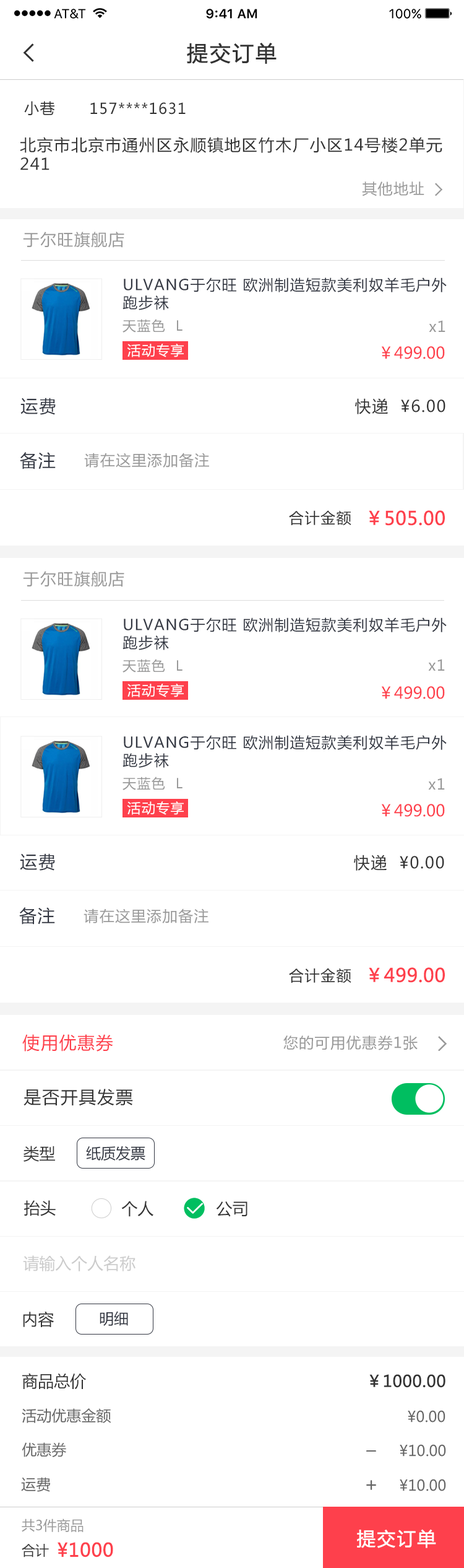
<style>
.page{position:relative;width:464px;height:1568px;background:#ffffff}
.page>*{position:absolute;margin:0}
.t1{font:21.1px "MicrosoftYaHei";letter-spacing:0.06em;color:#333333;font-weight:bold}
.t2{font:14.9px "MicrosoftYaHei";letter-spacing:0.06em;color:#333333}
.t3{font:16.1px "MicrosoftYaHei";letter-spacing:0.06em;color:#333333}
.t4{font:14.9px "MicrosoftYaHei";letter-spacing:0.06em;color:#999999}
.t5{font:16.1px "MicrosoftYaHei";letter-spacing:0.06em;color:#999999}
.t6{font:14.8px "MicrosoftYaHei";letter-spacing:0.06em;color:#343843}
.t7{font:13.6px "MicrosoftYaHei";letter-spacing:0.06em;color:#999999}
.t8{font:13.6px "MicrosoftYaHei";letter-spacing:0.06em;color:#ffffff}
.t9{font:16.1px "MicrosoftYaHei";color:#fe404c}
.t10{font:17.3px "MicrosoftYaHei";letter-spacing:0.06em;color:#343843}
.t11{font:18.6px "MicrosoftYaHei";color:#fe404c;font-weight:bold}
.t12{font:17.3px "MicrosoftYaHei";letter-spacing:0.06em;color:#fe404c}
.t13{font:17.3px "MicrosoftYaHei";letter-spacing:0.06em;color:#333333}
.t14{font:16.1px "MicrosoftYaHei";color:#333333}
.t15{font:14.9px "MicrosoftYaHei";color:#343843}
.t16{font:16.1px "MicrosoftYaHei";color:#cccccc}
.t17{font:16.1px "MicrosoftYaHei";color:#333333;font-weight:bold}
.t18{font:14.9px "MicrosoftYaHei";color:#666666}
.t19{font:13.6px "MicrosoftYaHei";color:#999999}
.t20{font:18.6px "MicrosoftYaHei";letter-spacing:0.06em;color:#ffffff;font-weight:bold}
.t21{font:13.6px "MicrosoftYaHei";color:#333333}
</style>
<div class="page">
<p class="t1" style="left:187px;top:43px;width:90px;height:21px">提交订单</p>
<p class="t2" style="left:24px;top:101px;width:31px;height:14px">小巷</p>
<p class="t2" style="left:90px;top:102px;width:96px;height:13px">157****1631</p>
<p class="t3" style="left:20px;top:137px;width:423px;height:33px">北京市北京市通州区永顺镇地区竹木厂小区14号楼2单元<br>241</p>
<p class="t4" style="left:362px;top:181px;width:63px;height:15px">其他地址</p>
<p class="t5" style="left:23px;top:232px;width:101px;height:16px">于尔旺旗舰店</p>
<p class="t6" style="left:123px;top:277px;width:324px;height:33px">ULVANG于尔旺 欧洲制造短款美利奴羊毛户外跑步袜</p>
<p class="t7" style="left:123px;top:319px;width:60px;height:14px">天蓝色  L</p>
<p class="t4" style="left:429px;top:320px;width:17px;height:12px">x1</p>
<p class="t8" style="left:127px;top:344px;width:57px;height:13px">活动专享</p>
<p class="t9" style="left:381px;top:346px;width:64px;height:13px">￥499.00</p>
<p class="t10" style="left:20px;top:398px;width:36px;height:17px">运费</p>
<p class="t3" style="left:355px;top:398px;width:91px;height:16px">快递  ¥6.00</p>
<p class="t10" style="left:20px;top:452px;width:36px;height:17px">备注</p>
<p class="t4" style="left:84px;top:453px;width:125px;height:15px">请在这里添加备注</p>
<p class="t2" style="left:289px;top:510px;width:63px;height:16px">合计金额</p>
<p class="t11" style="left:369px;top:510px;width:76px;height:16px">￥505.00</p>
<p class="t5" style="left:23px;top:571px;width:101px;height:16px">于尔旺旗舰店</p>
<p class="t6" style="left:123px;top:617px;width:324px;height:33px">ULVANG于尔旺 欧洲制造短款美利奴羊毛户外跑步袜</p>
<p class="t7" style="left:123px;top:659px;width:60px;height:14px">天蓝色  L</p>
<p class="t4" style="left:429px;top:659px;width:16px;height:12px">x1</p>
<p class="t8" style="left:127px;top:684px;width:57px;height:13px">活动专享</p>
<p class="t9" style="left:381px;top:686px;width:64px;height:13px">￥499.00</p>
<p class="t6" style="left:123px;top:735px;width:324px;height:33px">ULVANG于尔旺 欧洲制造短款美利奴羊毛户外跑步袜</p>
<p class="t7" style="left:123px;top:777px;width:60px;height:13px">天蓝色  L</p>
<p class="t4" style="left:429px;top:778px;width:16px;height:12px">x1</p>
<p class="t8" style="left:127px;top:801px;width:57px;height:14px">活动专享</p>
<p class="t9" style="left:381px;top:804px;width:64px;height:13px">￥499.00</p>
<p class="t10" style="left:20px;top:853px;width:35px;height:18px">运费</p>
<p class="t3" style="left:354px;top:855px;width:91px;height:16px">快递  ¥0.00</p>
<p class="t10" style="left:19px;top:907px;width:36px;height:18px">备注</p>
<p class="t4" style="left:84px;top:908px;width:125px;height:15px">请在这里添加备注</p>
<p class="t2" style="left:289px;top:968px;width:63px;height:15px">合计金额</p>
<p class="t11" style="left:369px;top:967px;width:76px;height:16px">￥499.00</p>
<p class="t12" style="left:22px;top:1034px;width:91px;height:18px">使用优惠券</p>
<p class="t4" style="left:284px;top:1035px;width:134px;height:15px">您的可用优惠券1张</p>
<p class="t13" style="left:24px;top:1089px;width:109px;height:17px">是否开具发票</p>
<p class="t14" style="left:24px;top:1146px;width:31px;height:16px">类型</p>
<p class="t15" style="left:86px;top:1146px;width:60px;height:15px">纸质发票</p>
<p class="t14" style="left:24px;top:1200px;width:32px;height:16px">抬头</p>
<p class="t14" style="left:121px;top:1201px;width:33px;height:16px">个人</p>
<p class="t14" style="left:216px;top:1201px;width:32px;height:16px">公司</p>
<p class="t16" style="left:23px;top:1255px;width:113px;height:16px">请输入个人名称</p>
<p class="t14" style="left:23px;top:1311px;width:31px;height:16px">内容</p>
<p class="t15" style="left:100px;top:1311px;width:28px;height:15px">明细</p>
<p class="t14" style="left:22px;top:1373px;width:64px;height:17px">商品总价</p>
<p class="t17" style="left:370px;top:1374px;width:76px;height:14px">￥1000.00</p>
<p class="t18" style="left:22px;top:1408px;width:89px;height:15px">活动优惠金额</p>
<p class="t18" style="left:408px;top:1410px;width:38px;height:12px">¥0.00</p>
<p class="t18" style="left:22px;top:1442px;width:44px;height:15px">优惠券</p>
<p class="t18" style="left:400px;top:1444px;width:46px;height:13px">¥10.00</p>
<p class="t18" style="left:21px;top:1477px;width:29px;height:15px">运费</p>
<p class="t18" style="left:400px;top:1479px;width:46px;height:12px">¥10.00</p>
<p class="t19" style="left:22px;top:1518px;width:62px;height:14px">共3件商品</p>
<p class="t20" style="left:357px;top:1529px;width:80px;height:19px">提交订单</p>
<p class="t11" style="left:58px;top:1542px;width:55px;height:15px">¥1000</p>
<p class="t21" style="left:22px;top:1544px;width:27px;height:13px">合计</p>
</div>
